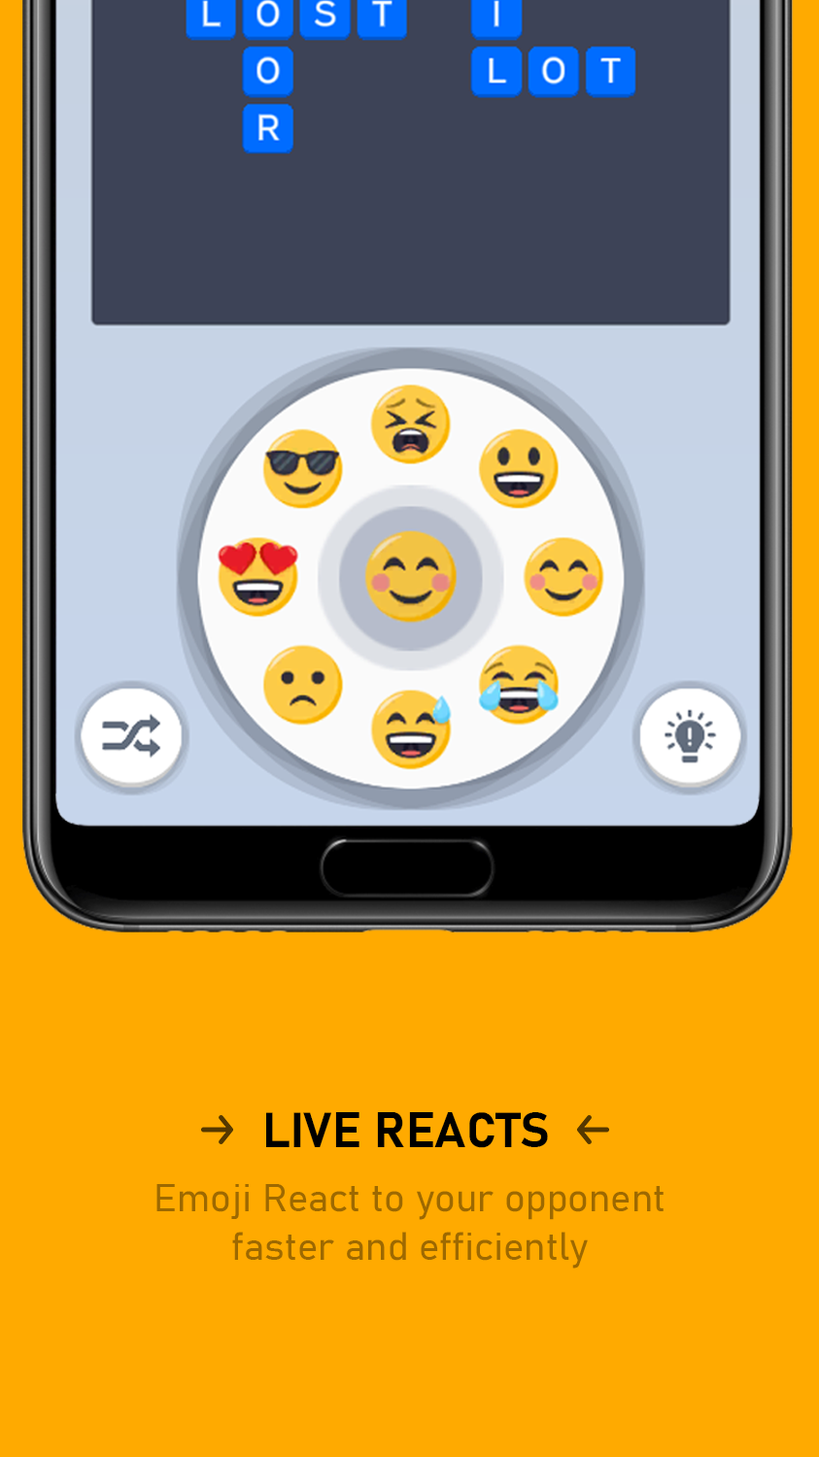
<style>
.page{position:relative;width:819px;height:1457px;background:#ffaa00}
.page>*{position:absolute;margin:0}
.t1{font:48.6px "Bahnschrift-Bold";color:#000000}
.t2{font:38.8px/48.6px "Bahnschrift-SemiLight";color:#9d6901}
</style>
<div class="page">
<p class="t1" style="left:266px;top:1112px;width:282px;height:36px">LIVE REACTS</p>
<p class="t2" style="left:156px;top:1184px;width:507px;height:84px;text-align:center">Emoji React to your opponent faster and efficiently</p>
</div>
